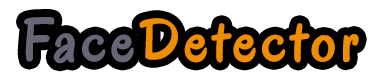
<style>
.page{position:relative;width:380px;height:80px;background:#ffffff}
.page>*{position:absolute;margin:0}
.t1{font:60px "Oregano-Regular";letter-spacing:0.065em;color:#ef8d02;font-weight:bold}
.t2{font:60px "Oregano-Regular";letter-spacing:0.065em;color:#666677;font-weight:bold}
</style>
<div class="page">
<p class="t1" style="left:24px;top:17px;width:335px;height:47px"><span class="t2">Face</span>Detector</p>
</div>
